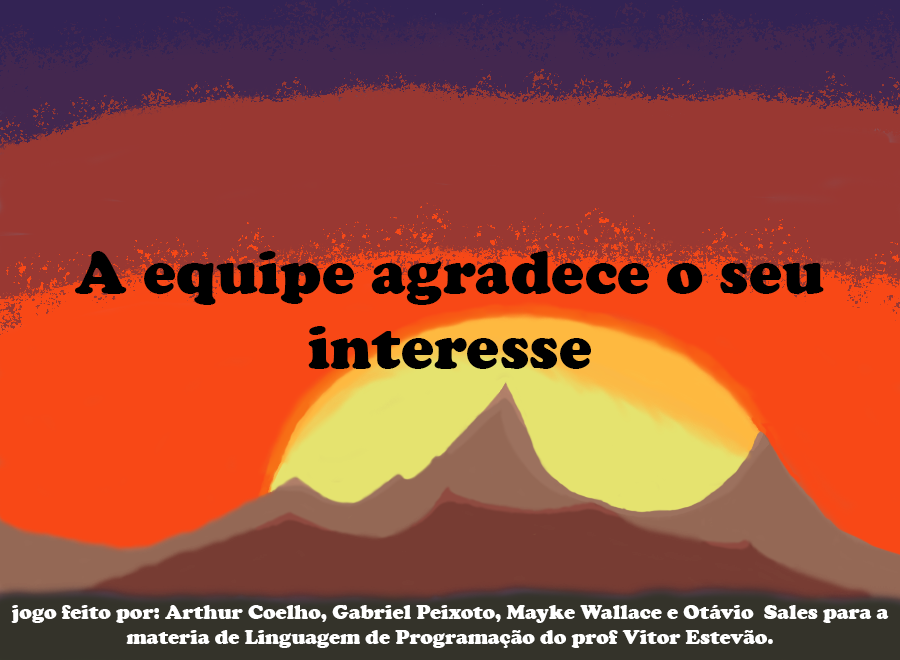
<style>
.page{position:relative;width:900px;height:660px;background:#993832}
.page>*{position:absolute;margin:0}
.t1{font:62.5px "CooperBlack";color:#000000}
.t2{font:20.8px "CooperBlack";color:#ffffff}
</style>
<div class="page">
<p class="t1" style="left:75px;top:251px;width:749px;height:118px;text-align:center">A equipe agradece o seu interesse</p>
<p class="t2" style="left:11px;top:605px;width:878px;height:43px;text-align:center">jogo feito por: Arthur Coelho, Gabriel Peixoto, Mayke Wallace e Otávio  Sales para a materia de Linguagem de Programação do prof Vitor Estevão.</p>
</div>
